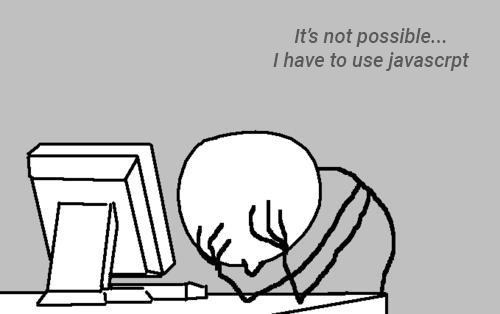
<style>
.page{position:relative;width:500px;height:314px;background:#c0c0c0}
.page>*{position:absolute;margin:0}
.t1{font:20px "Roboto-MediumItalic";color:#5a5a5a}
</style>
<div class="page">
<p class="t1" style="left:273px;top:28px;width:196px;height:43px;text-align:center">It’s not possible...<br>I have to use javascrpt</p>
</div>
